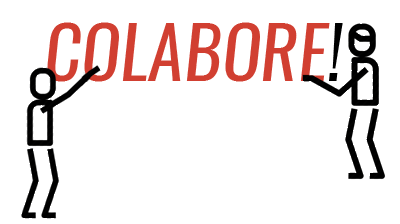
<style>
.page{position:relative;width:400px;height:224px;background:#ffffff}
.page>*{position:absolute;margin:0}
.t1{font:72px "Oswald-RegularItalic";color:#d13f31}
.t2{font:72px "Oswald-RegularItalic";color:#000000}
</style>
<div class="page">
<p class="t1" style="left:47px;top:22px;width:296px;height:60px">COLABORE<span class="t2">!</span></p>
</div>
